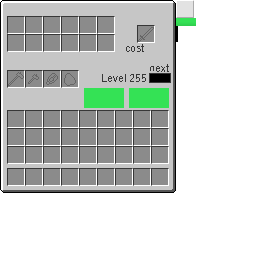
<style>
.page{position:relative;width:256px;height:256px;background:#ffffff}
.page>*{position:absolute;margin:0}
.t1{font:10.6px "YuGothic-Light";color:#373737}
</style>
<div class="page">
<p class="t1" style="left:126px;top:44px;width:18px;height:8px">cost</p>
<p class="t1" style="left:150px;top:64px;width:19px;height:8px">next</p>
<p class="t1" style="left:102px;top:74px;width:44px;height:8px">Level 255</p>
</div>
